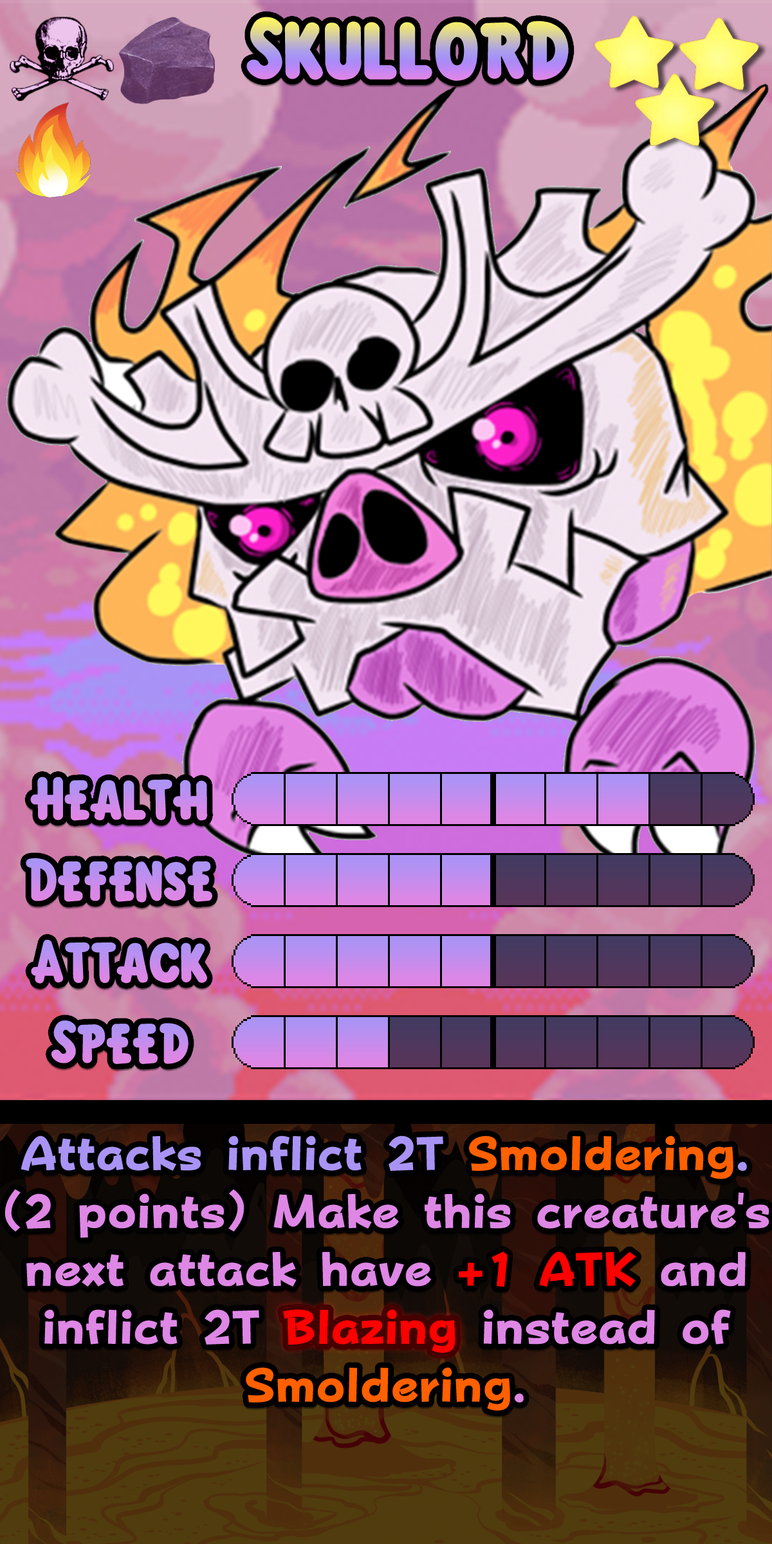
<style>
.page{position:relative;width:772px;height:1544px}
.page>*{position:absolute;margin:0}
.t1{font:135.1px "KirbyClassic"}
.t2{font:92.7px "KirbyClassic"}
.t3{font:81.1px/57.9px "FOTPopHappinessStrp-ExtraBold";color:#de87e5}
.t4{font:81.1px/57.9px "FOTPopHappinessStrp-ExtraBold";color:#a994f5}
.t5{font:81.1px/57.9px "FOTPopHappinessStrp-ExtraBold";color:#ff6000}
.t6{font:81.1px/57.9px "FOTPopHappinessStrp-ExtraBold";color:#ff0000}
</style>
<div class="page">
<p class="t1" style="left:246px;top:17px;width:323px;height:64px">Skullord</p>
<p class="t2" style="left:30px;top:777px;width:178px;height:44px">Health</p>
<p class="t2" style="left:26px;top:858px;width:186px;height:45px">Defense</p>
<p class="t2" style="left:31px;top:939px;width:176px;height:45px">Attack</p>
<p class="t2" style="left:51px;top:1021px;width:138px;height:43px">Speed</p>
<p class="t3" style="left:5px;top:1136px;width:765px;height:275px;text-align:center"><span class="t4">Attacks inflict 2T </span><span class="t5">Smoldering</span><span class="t4">.<br></span>(2 points) Make this creature's next attack have <span class="t6">+1 ATK</span> and inflict 2T <span class="t6">Blazing </span>instead of <span class="t5">Smoldering</span>.</p>
</div>
